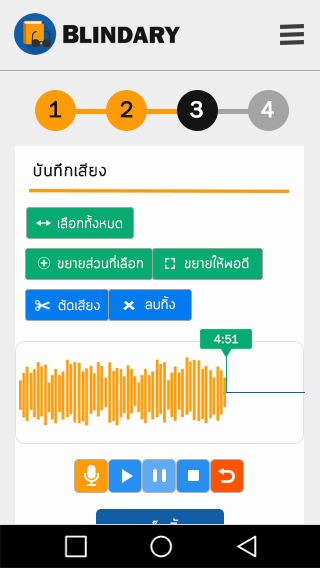
<style>
.page{position:relative;width:320px;height:568px;background:#fdfdfd}
.page>*{position:absolute;margin:0}
.t1{font:23px "FranklinGothic-Book";color:#141414;font-weight:bold}
.t2{font:23px "FranklinGothic-Book";color:#ffffff;font-weight:bold}
.t3{font:18px "Cloud-Light";color:#141414;font-weight:bold}
.t4{font:15px "Cloud-Light";color:#ffffff}
</style>
<div class="page">
<p class="t1" style="left:49px;top:101px;width:13px;height:17px">1</p>
<p class="t1" style="left:120px;top:101px;width:13px;height:17px">2</p>
<p class="t2" style="left:190px;top:101px;width:13px;height:17px">3</p>
<p class="t2" style="left:261px;top:101px;width:13px;height:17px">4</p>
<p class="t3" style="left:33px;top:162px;width:73px;height:15px">บันทึกเสียง</p>
<p class="t4" style="left:58px;top:215px;width:64px;height:14px">เลือกทั้งหมด</p>
<p class="t4" style="left:58px;top:255px;width:85px;height:14px">ขยายส่วนที่เลือก</p>
<p class="t4" style="left:185px;top:255px;width:64px;height:14px">ขยายให้พอดี</p>
<p class="t4" style="left:58px;top:299px;width:42px;height:12px">ตัดเสียง</p>
<p class="t4" style="left:145px;top:296px;width:30px;height:14px">ลบทิ้ง</p>
</div>
